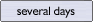
<style>
.page{position:relative;width:93px;height:22px}
.page>*{position:absolute;margin:0}
.t1{font:12px "Humanist521BT-Roman";color:#000000}
</style>
<div class="page">
<p class="t1" style="left:17px;top:6px;width:58px;height:12px">several days</p>
</div>
